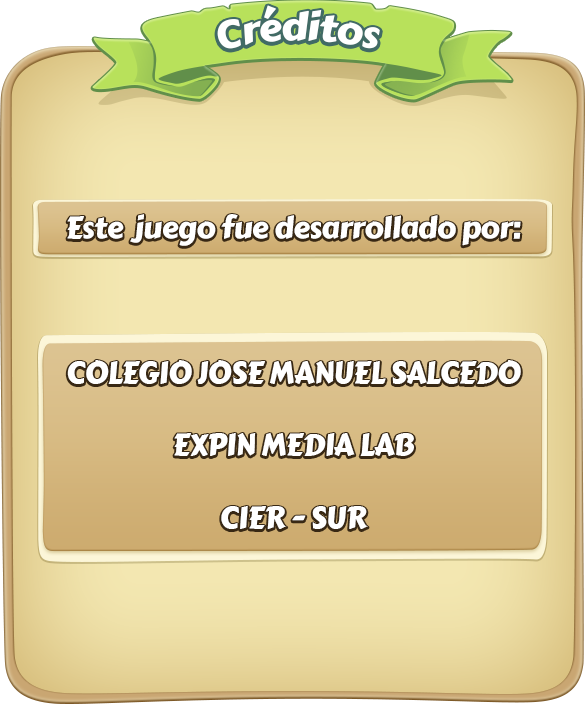
<style>
.page{position:relative;width:585px;height:704px}
.page>*{position:absolute;margin:0}
.t1{font:38px "CarterOne";letter-spacing:-0.02em;color:#ffffff}
.t2{font:30px/36.2px "CarterOne";letter-spacing:-0.02em;color:#ffffff}
</style>
<div class="page">
<p class="t1" style="left:217px;top:5px;width:163px;height:44px">Créditos</p>
<p class="t2" style="left:67px;top:214px;width:454px;height:315px;text-align:center">Este  juego fue desarrollado por:<br><br><br><br>COLEGIO JOSE MANUEL SALCEDO<br><br>EXPIN MEDIA LAB<br><br>CIER - SUR</p>
</div>
